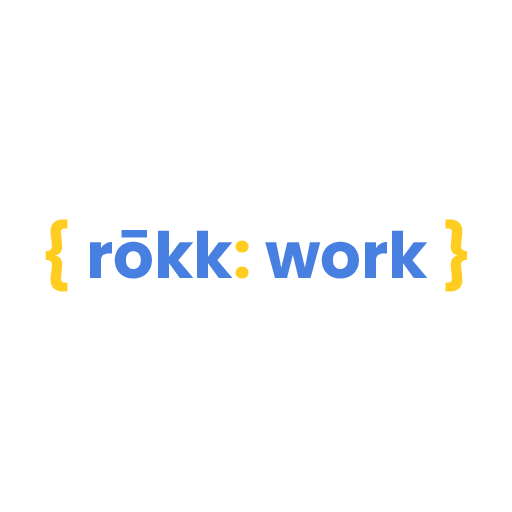
<style>
.page{position:relative;width:512px;height:512px;background:#ffffff}
.page>*{position:absolute;margin:0}
.t1{font:64px "Poppins-Bold";color:#4880e1}
.t2{font:64px "Poppins-Bold";color:#ffcd20}
</style>
<div class="page">
<p class="t1" style="left:45px;top:219px;width:422px;height:73px"><span class="t2">{ </span>rōkk<span class="t2">: </span>work <span class="t2">}</span></p>
</div>
